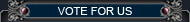
<style>
.page{position:relative;width:190px;height:22px;background:#002037}
.page>*{position:absolute;margin:0}
.t1{font:11px "ArialMT";color:#ffffff}
</style>
<div class="page">
<p class="t1" style="left:57px;top:7px;width:75px;height:8px">VOTE FOR US</p>
</div>
